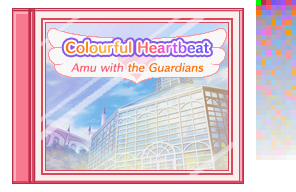
<style>
.page{position:relative;width:296px;height:192px}
.page>*{position:absolute;margin:0}
.t1{font:13px "HummingStd-B";letter-spacing:0.02em}
.t2{font:10px "HummingStd-D";letter-spacing:0.02em;color:#f87810;font-style:italic}
.t3{font:10px "HummingStd-D";letter-spacing:0.02em;color:#f86078;font-style:italic}
</style>
<div class="page">
<p class="t1" style="left:65px;top:41px;width:144px;height:13px">Colourful Heartbeat</p>
<p class="t2" style="left:71px;top:62px;width:133px;height:10px"><span class="t3">Amu with </span>the Guardians</p>
</div>
